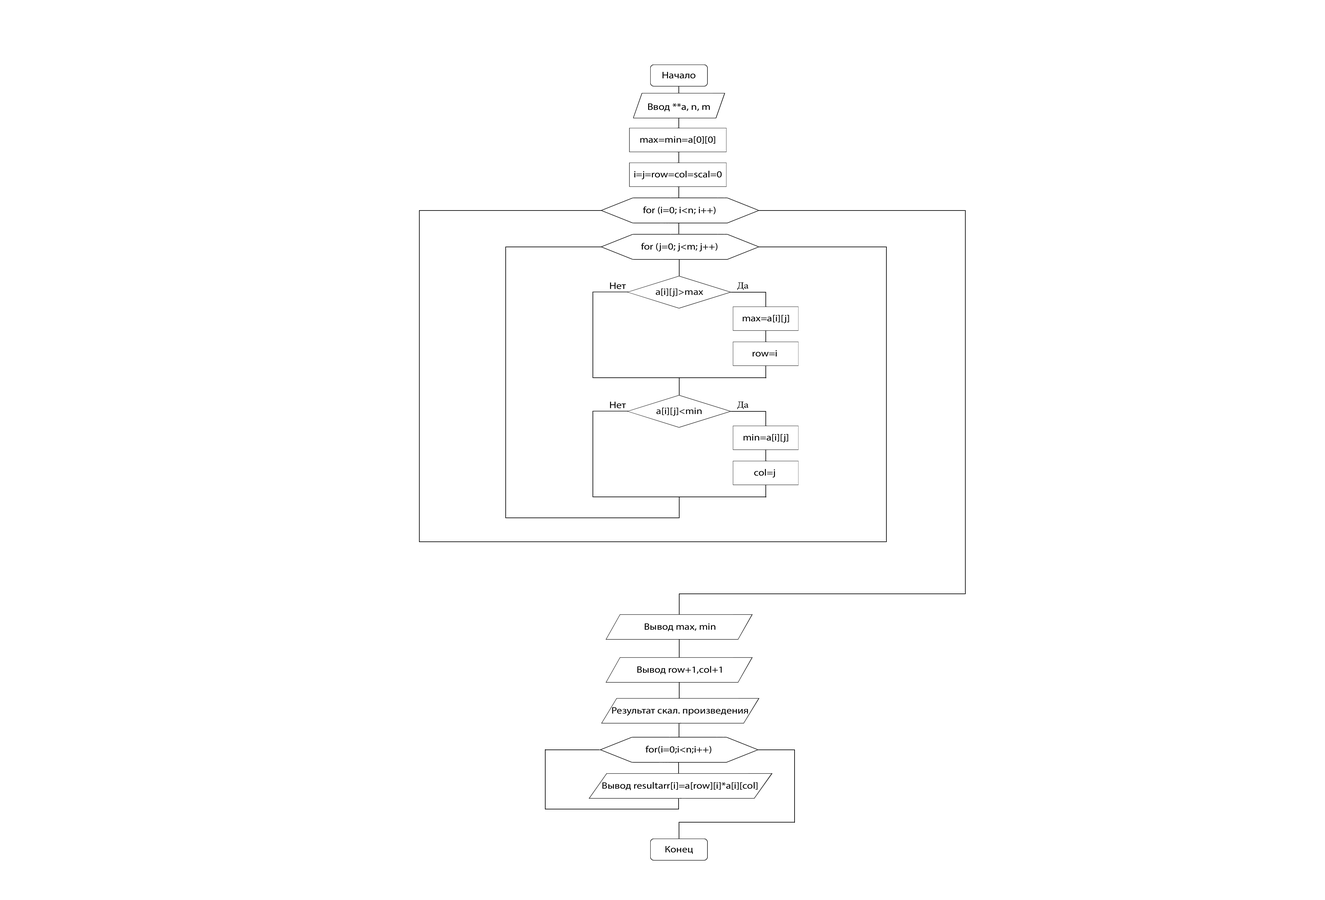
<style>
.page{position:relative;width:1325px;height:900px;background:#ffffff}
.page>*{position:absolute;margin:0}
.t1{font:9.5px "MyriadPro-Regular";color:#000000;scale:1.14 1}
.t2{font:9.3px "MyriadPro-Regular";color:#000000;scale:1.14 1}
.t3{font:9.5px "MyriadPro-Regular";color:#000000;scale:1.13 1}
</style>
<div class="page">
<p class="t1" style="left:662px;top:72px;width:33px;height:7px">Начало</p>
<p class="t1" style="left:648px;top:103px;width:62px;height:8px">Ввод **a, n, m</p>
<p class="t2" style="left:640px;top:136px;width:75px;height:8px">max=min=a[0][0]</p>
<p class="t2" style="left:634px;top:171px;width:88px;height:8px">i=j=row=col=scal=0</p>
<p class="t2" style="left:643px;top:206px;width:73px;height:8px">for (i=0; i&lt;n; i++)</p>
<p class="t2" style="left:641px;top:243px;width:76px;height:9px">for (j=0; j&lt;m; j++)</p>
<p class="t3" style="left:610px;top:282px;width:16px;height:7px">Нет</p>
<p class="t2" style="left:656px;top:288px;width:47px;height:9px">a[i][j]&gt;max</p>
<p class="t2" style="left:743px;top:315px;width:46px;height:8px">max=a[i][j]</p>
<p class="t2" style="left:753px;top:350px;width:24px;height:7px">row=i</p>
<p class="t3" style="left:610px;top:401px;width:16px;height:7px">Нет</p>
<p class="t2" style="left:656px;top:407px;width:46px;height:9px">a[i][j]&lt;min</p>
<p class="t2" style="left:743px;top:434px;width:45px;height:9px">min=a[i][j]</p>
<p class="t2" style="left:754px;top:469px;width:21px;height:9px">col=j</p>
<p class="t2" style="left:645px;top:623px;width:71px;height:8px">Вывод max, min</p>
<p class="t2" style="left:637px;top:666px;width:85px;height:8px">Вывод row+1,col+1</p>
<p class="t2" style="left:612px;top:707px;width:136px;height:9px">Результат cкал. произведения</p>
<p class="t2" style="left:646px;top:746px;width:65px;height:8px">for(i=0;i&lt;n;i++)</p>
<p class="t2" style="left:602px;top:782px;width:156px;height:8px">Вывод resultarr[i]=a[row][i]*a[i][col]</p>
<p class="t2" style="left:665px;top:846px;width:28px;height:8px">Конец</p>
</div>
